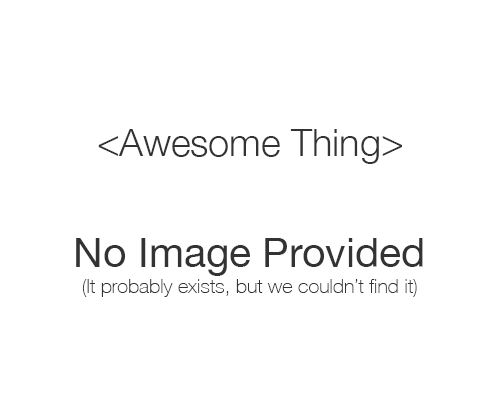
<style>
.page{position:relative;width:500px;height:400px;background:#ffffff}
.page>*{position:absolute;margin:0}
.t1{font:37.7px "HelveticaNeue-Light";color:#333333}
.t2{font:41px "HelveticaNeue";color:#333333}
.t3{font:20px "HelveticaNeue-Thin";color:#333333}
</style>
<div class="page">
<p class="t1" style="left:98px;top:129px;width:304px;height:35px">&lt;Awesome Thing&gt;</p>
<p class="t2" style="left:76px;top:238px;width:347px;height:38px">No Image Provided</p>
<p class="t3" style="left:82px;top:279px;width:335px;height:18px">(It probably exists, but we couldn’t find it)</p>
</div>
